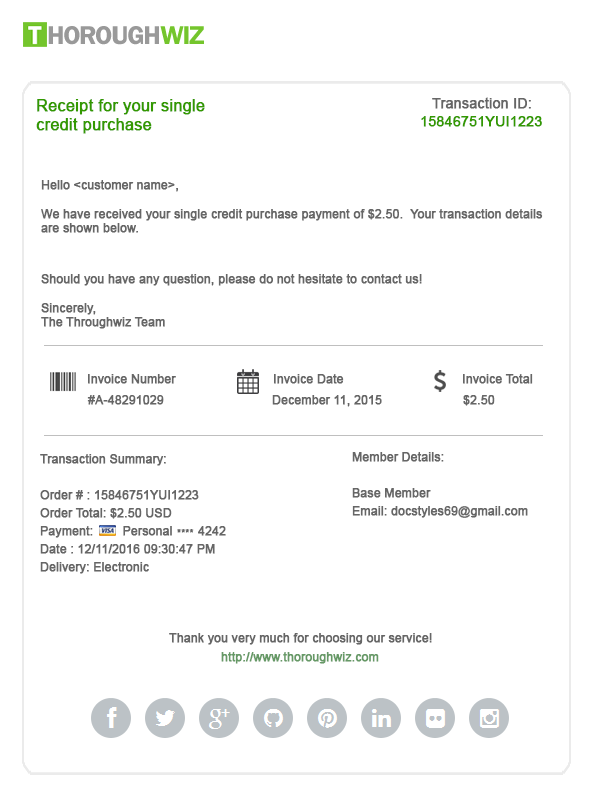
<style>
.page{position:relative;width:600px;height:800px;background:#ffffff}
.page>*{position:absolute;margin:0}
.t1{font:16px "ArialMT";color:#339900;font-weight:bold}
.t2{font:14px "ArialMT";color:#666666;font-weight:bold}
.t3{font:14px "ArialMT";color:#339900;font-weight:bold}
.t4{font:12px "ArialMT";color:#666666;font-weight:bold}
.t5{font:12px/18px "ArialMT";color:#666666;font-weight:bold}
.t6{font:10px "ArialMT";color:#666666;font-weight:bold}
.t7{font:12px "ArialMT";color:#669966;font-weight:bold}
</style>
<div class="page">
<p class="t1" style="left:36px;top:99px;width:169px;height:35px">Receipt for your single <br>credit purchase</p>
<p class="t2" style="left:432px;top:97px;width:99px;height:12px">Transaction ID:</p>
<p class="t3" style="left:421px;top:116px;width:121px;height:11px">15846751YUI1223</p>
<p class="t4" style="left:41px;top:180px;width:137px;height:12px">Hello &lt;customer name&gt;,</p>
<p class="t4" style="left:41px;top:209px;width:502px;height:24px">We have received your single credit purchase payment of $2.50.  Your transaction details<br>are shown below.</p>
<p class="t4" style="left:41px;top:274px;width:381px;height:55px">Should you have any question, please do not hesitate to contact us!<br><br>Sincerely,<br>The Throughwiz Team</p>
<p class="t4" style="left:88px;top:374px;width:88px;height:10px">Invoice Number</p>
<p class="t4" style="left:274px;top:374px;width:70px;height:10px">Invoice Date</p>
<p class="t4" style="left:463px;top:374px;width:70px;height:10px">Invoice Total</p>
<p class="t4" style="left:87px;top:395px;width:77px;height:10px">#A-48291029</p>
<p class="t4" style="left:272px;top:395px;width:110px;height:12px">December 11, 2015</p>
<p class="t4" style="left:463px;top:395px;width:32px;height:11px">$2.50</p>
<p class="t5" style="left:40px;top:454px;width:186px;height:120px">Transaction Summary:<br><br>Order # : 15846751YUI1223<br>Order Total: $2.50 USD<br>Payment:        Personal       4242<br>Date : 12/11/2016 09:30:47 PM<br>Delivery: Electronic</p>
<p class="t5" style="left:352px;top:452px;width:176px;height:66px">Member Details:<br><br>Base Member<br>Email: docstyles69@gmail.com</p>
<p class="t6" style="left:177px;top:529px;width:17px;height:4px">****</p>
<p class="t4" style="left:169px;top:633px;width:263px;height:12px">Thank you very much for choosing our service!</p>
<p class="t7" style="left:221px;top:652px;width:158px;height:12px">http://www.thoroughwiz.com</p>
</div>
